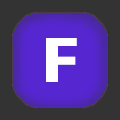
<style>
.page{position:relative;width:120px;height:120px;background:#333333}
.page>*{position:absolute;margin:0}
.t1{font:63.1px "Ebrima-Bold";color:#ffffff;scale:1.2 1}
</style>
<div class="page">
<p class="t1" style="left:46px;top:38px;width:31px;height:44px">F</p>
</div>
